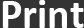
<style>
.page{position:relative;width:84px;height:28px;background:#333333}
.page>*{position:absolute;margin:0}
.t1{font:41.7px "Calibri-Bold";color:#ffffff}
</style>
<div class="page">
<p class="t1" style="left:2px;top:0px;width:82px;height:28px">Print</p>
</div>
